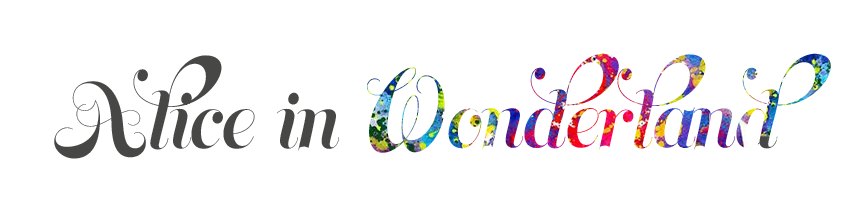
<style>
.page{position:relative;width:864px;height:216px;background:#ffffff}
.page>*{position:absolute;margin:0}
.t1{font:72px "MemoriamProHeadline"}
.t2{font:83px "MemoriamProHeadline"}
.t3{font:72px "MemoriamProHeadline";color:#474745}
</style>
<div class="page">
<p class="t1" style="left:367px;top:53px;width:464px;height:100px"><span class="t2">W</span>onderland</p>
<p class="t3" style="left:54px;top:55px;width:285px;height:104px">Alice in</p>
</div>
